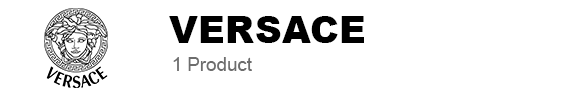
<style>
.page{position:relative;width:587px;height:95px;background:#ffffff}
.page>*{position:absolute;margin:0}
.t1{font:37.5px "Arial-Black";color:#000000}
.t2{font:18.7px "ArialMT";color:#6d6d6d}
</style>
<div class="page">
<p class="t1" style="left:169px;top:16px;width:195px;height:27px">VERSACE</p>
<p class="t2" style="left:173px;top:57px;width:79px;height:14px">1 Product</p>
</div>
